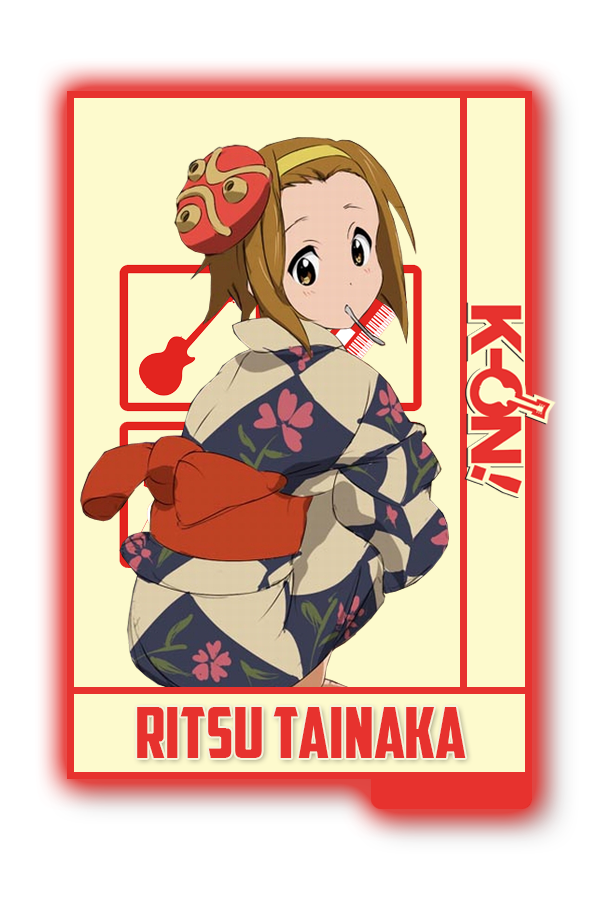
<style>
.page{position:relative;width:600px;height:900px;background:#fdfacd}
.page>*{position:absolute;margin:0}
.t1{font:70.8px "AmericanCaptain";color:#e7322e}
</style>
<div class="page">
<p class="t1" style="left:137px;top:707px;width:329px;height:51px">Ritsu Tainaka</p>
</div>
